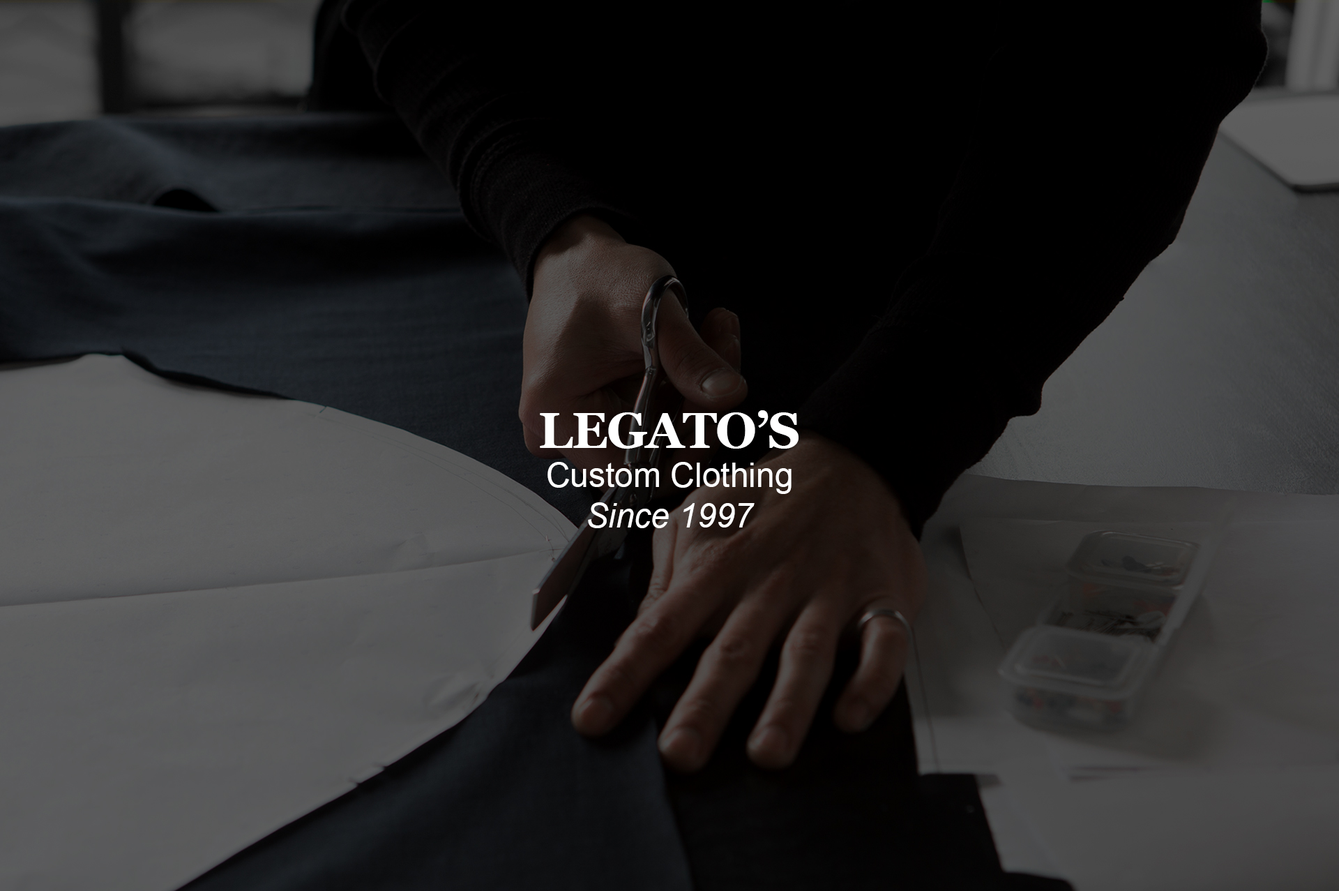
<style>
.page{position:relative;width:1339px;height:891px}
.page>*{position:absolute;margin:0}
.t1{font:50.2px "Georgia-Bold";letter-spacing:-0.025em;color:#ffffff}
.t2{font:33.5px "ArialMT";color:#ffffff}
.t3{font:33.5px "Arial-ItalicMT";color:#ffffff}
</style>
<div class="page">
<p class="t1" style="left:540px;top:410px;width:259px;height:38px">LEGATO’S</p>
<p class="t2" style="left:547px;top:462px;width:245px;height:66px;text-align:center">Custom Clothing<br><span class="t3">Since 1997</span></p>
</div>
